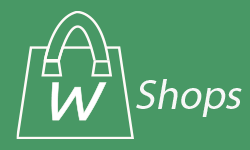
<style>
.page{position:relative;width:250px;height:150px;background:#489865}
.page>*{position:absolute;margin:0}
.t1{font:41.7px "MyriadPro-Regular";color:#f7f7f7;font-style:italic}
</style>
<div class="page">
<p class="t1" style="left:136px;top:79px;width:106px;height:38px">Shops</p>
</div>
